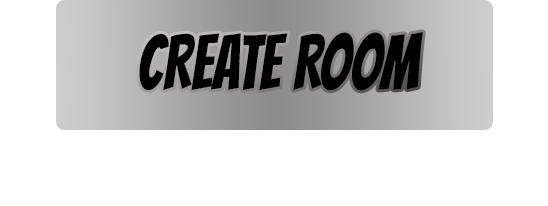
<style>
.page{position:relative;width:548px;height:206px;background:#ffffff}
.page>*{position:absolute;margin:0}
.t1{font:76.7px "Bangers-Regular";color:#000000;scale:0.81 1}
</style>
<div class="page">
<p class="t1" style="left:139px;top:32px;width:284px;height:59px">CREATE ROOM</p>
</div>
